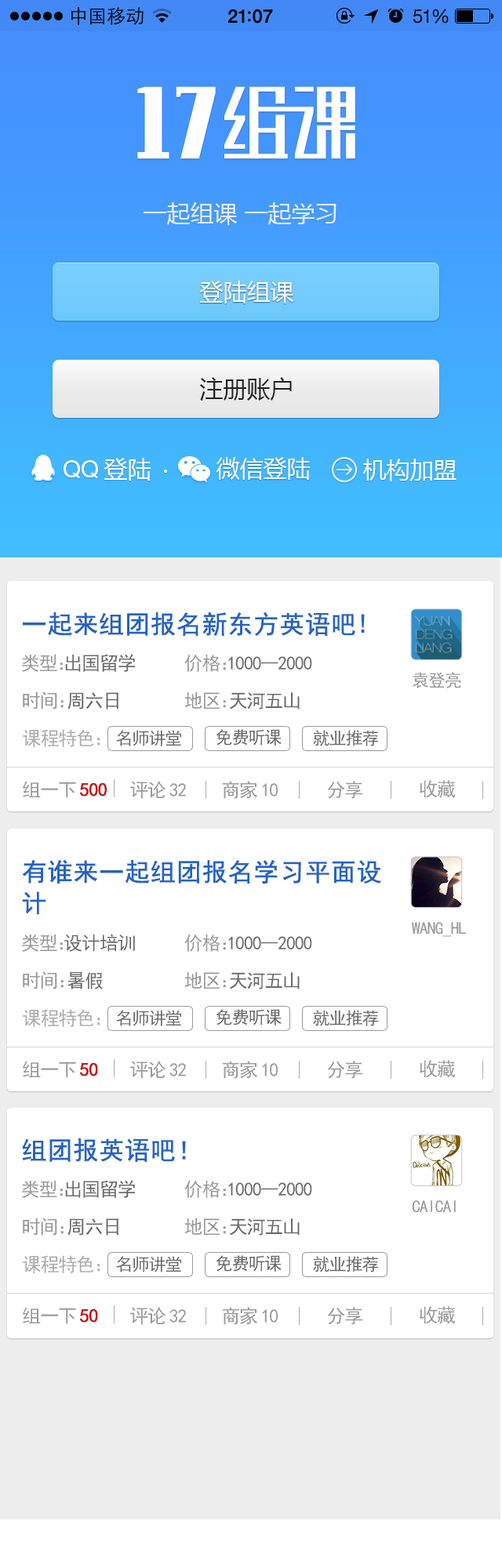
<style>
.page{position:relative;width:502px;height:1568px;background:#ffffff}
.page>*{position:absolute;margin:0}
.t1{font:23.5px "MicrosoftYaHei";color:#ededed}
.t2{font:23.5px "MicrosoftYaHei";color:#fefefe}
.t3{font:23.5px "MicrosoftYaHei";color:#222222}
.t4{font:23.5px "HelveticaLTStd-Roman";color:#fefefe}
.t5{font:25.1px "SimHei";color:#2463c5;font-weight:bold}
.t6{font:18.8px "SimHei";letter-spacing:-0.05em;color:#696969}
.t7{font:18.8px "SimHei";letter-spacing:-0.05em;color:#999999}
.t8{font:18.8px "SimHei";letter-spacing:-0.62em;color:#999999}
.t9{font:17.2px "SimHei";letter-spacing:-0.05em;color:#999999}
.t10{font:18.8px "SimHei";letter-spacing:-0.5em;color:#999999}
.t11{font:18.8px "SimHei";letter-spacing:-0.52em;color:#999999}
.t12{font:18.8px "SimHei";letter-spacing:-0.05em;color:#acacac}
.t13{font:18.8px "SimHei";color:#acacac}
.t14{font:17.2px "SimHei";letter-spacing:-0.05em;color:#696969}
.t15{font:18.8px "SimHei";letter-spacing:-0.05em;color:#c61414;font-weight:bold}
.t16{font:18.8px "SimHei";letter-spacing:0.15em;color:#999999}
.t17{font:25.1px/31.4px "SimHei";color:#2463c5;font-weight:bold}
</style>
<div class="page">
<p class="t1" style="left:143px;top:202px;width:193px;height:23px">一起组课 一起学习</p>
<p class="t2" style="left:199px;top:281px;width:94px;height:22px">登陆组课</p>
<p class="t3" style="left:200px;top:377px;width:92px;height:24px">注册账户</p>
<p class="t4" style="left:64px;top:460px;width:34px;height:18px">QQ</p>
<p class="t2" style="left:103px;top:458px;width:48px;height:23px">登陆</p>
<p class="t2" style="left:216px;top:457px;width:94px;height:23px">微信登陆</p>
<p class="t2" style="left:363px;top:459px;width:93px;height:22px">机构加盟</p>
<p class="t5" style="left:23px;top:612px;width:342px;height:24px">一起来组团报名新东方英语吧!</p>
<p class="t6" style="left:22px;top:654px;width:113px;height:18px"><span class="t7">类型</span><span class="t8">：</span>出国留学</p>
<p class="t6" style="left:184px;top:654px;width:128px;height:18px"><span class="t7">价格</span><span class="t8">：</span>1000--2000</p>
<p class="t9" style="left:412px;top:672px;width:49px;height:16px">袁登亮</p>
<p class="t6" style="left:23px;top:691px;width:95px;height:19px"><span class="t7">时间</span><span class="t10">：</span>周六日</p>
<p class="t6" style="left:184px;top:691px;width:115px;height:19px"><span class="t7">地区</span><span class="t11">：</span>天河五山</p>
<p class="t12" style="left:23px;top:729px;width:77px;height:18px">课程特色<span class="t13">：</span></p>
<p class="t14" style="left:116px;top:730px;width:66px;height:16px">名师讲堂</p>
<p class="t14" style="left:216px;top:729px;width:65px;height:17px">免费听课</p>
<p class="t14" style="left:313px;top:730px;width:65px;height:16px">就业推荐</p>
<p class="t15" style="left:23px;top:781px;width:84px;height:17px"><span class="t7">组一</span><span class="t16">下</span>500</p>
<p class="t7" style="left:130px;top:781px;width:56px;height:18px">评<span class="t16">论</span>32</p>
<p class="t7" style="left:223px;top:781px;width:55px;height:18px">商<span class="t16">家</span>10</p>
<p class="t7" style="left:327px;top:781px;width:36px;height:18px">分享</p>
<p class="t7" style="left:419px;top:780px;width:37px;height:18px">收藏</p>
<p class="t17" style="left:22px;top:859px;width:359px;height:56px">有谁来一起组团报名学习平面设<br>计</p>
<p class="t9" style="left:412px;top:922px;width:54px;height:15px">WANG_HL</p>
<p class="t6" style="left:22px;top:934px;width:113px;height:18px"><span class="t7">类型</span><span class="t8">：</span>设计培训</p>
<p class="t6" style="left:184px;top:934px;width:128px;height:18px"><span class="t7">价格</span><span class="t8">：</span>1000--2000</p>
<p class="t7" style="left:23px;top:971px;width:80px;height:18px">时间<span class="t10">：</span><span class="t6">暑假</span></p>
<p class="t6" style="left:184px;top:971px;width:115px;height:18px"><span class="t7">地区</span><span class="t11">：</span>天河五山</p>
<p class="t12" style="left:23px;top:1009px;width:77px;height:18px">课程特色<span class="t13">：</span></p>
<p class="t14" style="left:116px;top:1010px;width:66px;height:16px">名师讲堂</p>
<p class="t14" style="left:216px;top:1009px;width:65px;height:16px">免费听课</p>
<p class="t14" style="left:313px;top:1010px;width:65px;height:16px">就业推荐</p>
<p class="t7" style="left:23px;top:1061px;width:75px;height:17px">组一<span class="t16">下</span><span class="t15">50</span></p>
<p class="t7" style="left:130px;top:1061px;width:56px;height:18px">评<span class="t16">论</span>32</p>
<p class="t7" style="left:223px;top:1061px;width:55px;height:18px">商<span class="t16">家</span>10</p>
<p class="t7" style="left:327px;top:1061px;width:36px;height:18px">分享</p>
<p class="t7" style="left:419px;top:1060px;width:37px;height:18px">收藏</p>
<p class="t5" style="left:22px;top:1138px;width:164px;height:24px">组团报英语吧！</p>
<p class="t6" style="left:22px;top:1180px;width:113px;height:18px"><span class="t7">类型</span><span class="t8">：</span>出国留学</p>
<p class="t6" style="left:184px;top:1180px;width:128px;height:18px"><span class="t7">价格</span><span class="t8">：</span>1000--2000</p>
<p class="t9" style="left:412px;top:1200px;width:44px;height:13px">CAICAI</p>
<p class="t6" style="left:23px;top:1218px;width:95px;height:18px"><span class="t7">时间</span><span class="t10">：</span>周六日</p>
<p class="t6" style="left:184px;top:1218px;width:115px;height:18px"><span class="t7">地区</span><span class="t11">：</span>天河五山</p>
<p class="t12" style="left:23px;top:1255px;width:77px;height:18px">课程特色<span class="t13">：</span></p>
<p class="t14" style="left:116px;top:1256px;width:66px;height:16px">名师讲堂</p>
<p class="t14" style="left:216px;top:1255px;width:65px;height:17px">免费听课</p>
<p class="t14" style="left:313px;top:1256px;width:65px;height:16px">就业推荐</p>
<p class="t7" style="left:23px;top:1307px;width:75px;height:17px">组一<span class="t16">下</span><span class="t15">50</span></p>
<p class="t7" style="left:130px;top:1307px;width:56px;height:18px">评<span class="t16">论</span>32</p>
<p class="t7" style="left:223px;top:1307px;width:55px;height:18px">商<span class="t16">家</span>10</p>
<p class="t7" style="left:327px;top:1307px;width:36px;height:18px">分享</p>
<p class="t7" style="left:419px;top:1306px;width:37px;height:18px">收藏</p>
</div>
